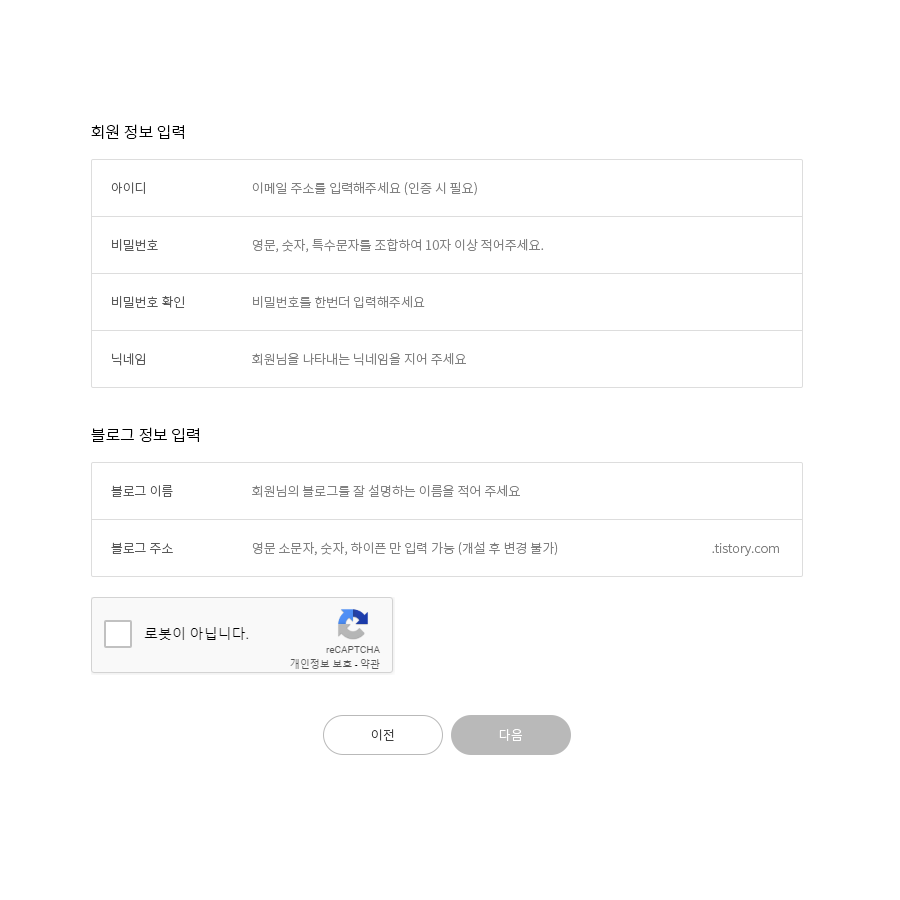
<style>
.page{position:relative;width:900px;height:900px;background:#ffffff}
.page>*{position:absolute;margin:0}
.t1{font:16px "NotoSansKR-Light";color:#000000}
.t2{font:13px/57px "NotoSansKR-Light";color:#595959}
.t3{font:13px/57px "NotoSansKR-Light";color:#818181}
.t4{font:13px "NotoSansKR-Light";color:#818181}
.t5{font:13px "NotoSansKR-Light";color:#3f3f3f}
.t6{font:13px "NotoSansKR-Light";color:#ffffff}
</style>
<div class="page">
<p class="t1" style="left:91px;top:124px;width:93px;height:15px">회원 정보 입력</p>
<p class="t2" style="left:111px;top:182px;width:74px;height:184px">아이디<br>비밀번호<br>비밀번호 확인<br>닉네임</p>
<p class="t3" style="left:252px;top:181px;width:292px;height:185px">이메일 주소를 입력해주세요 (인증 시 필요)<br>영문, 숫자, 특수문자를 조합하여 10자 이상 적어주세요.<br>비밀번호를 한번더 입력해주세요<br>회원님을 나타내는 닉네임을 지어 주세요</p>
<p class="t1" style="left:91px;top:427px;width:108px;height:15px">블로그 정보 입력</p>
<p class="t2" style="left:111px;top:485px;width:62px;height:70px">블로그 이름<br>블로그 주소</p>
<p class="t3" style="left:252px;top:484px;width:306px;height:72px">회원님의 블로그를 잘 설명하는 이름을 적어 주세요<br>영문 소문자, 숫자, 하이픈 만 입력 가능 (개설 후 변경 불가)</p>
<p class="t4" style="left:712px;top:543px;width:67px;height:13px">.tistory.com</p>
<p class="t5" style="left:371px;top:729px;width:23px;height:12px">이전</p>
<p class="t6" style="left:499px;top:729px;width:23px;height:12px">다음</p>
</div>
